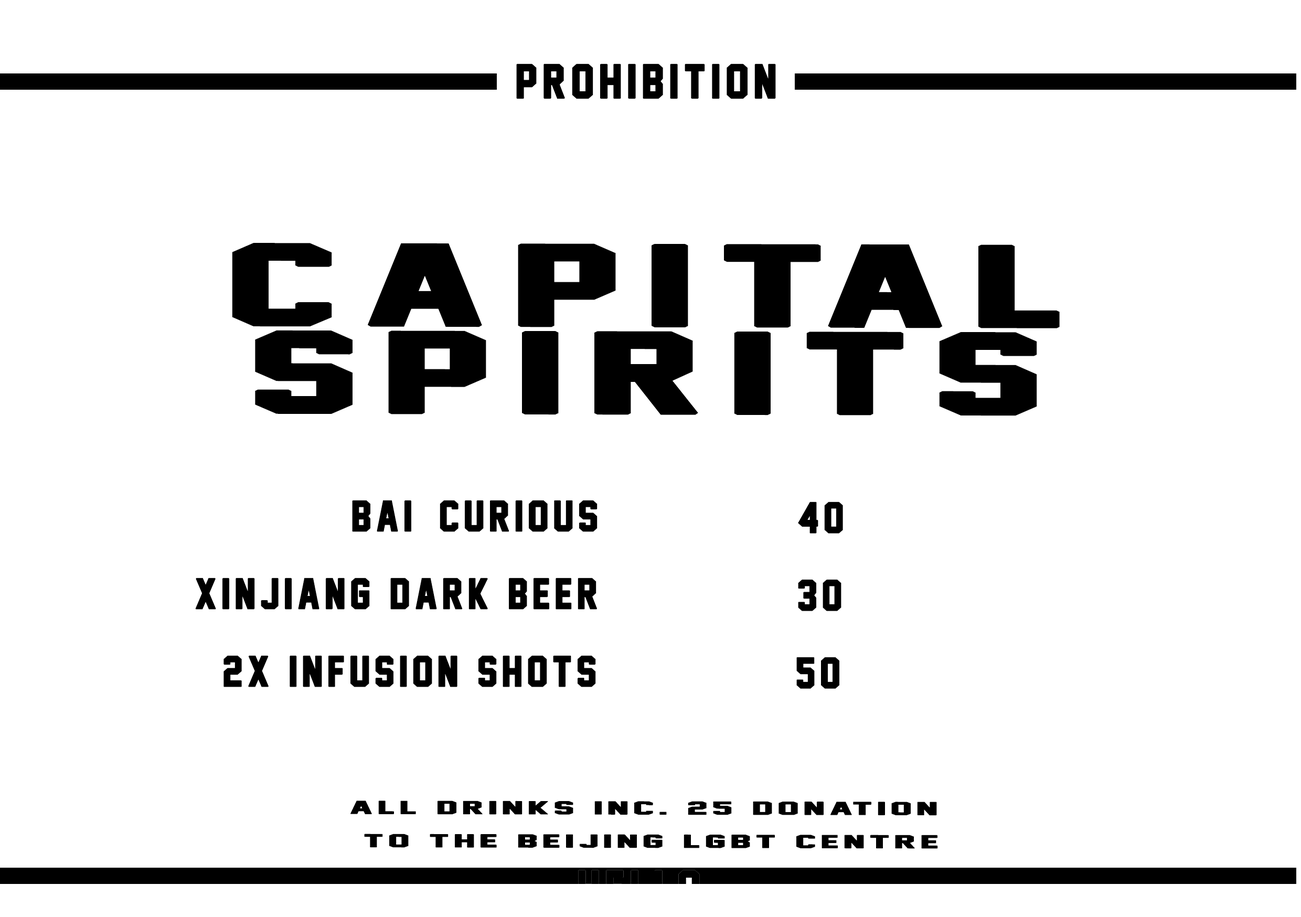
<style>
.page{position:relative;width:1301px;height:917px;background:#ffffff}
.page>*{position:absolute;margin:0}
.t1{font:43.7px "JerseyM54";letter-spacing:0.1em;color:#000000;font-weight:bold}
.t2{font:104.9px/87.4px "JerseyM54";letter-spacing:0.1em;color:#000000;font-weight:bold;scale:2.04 1}
.t3{font:39.3px "JerseyM54";letter-spacing:0.1em;color:#000000;font-weight:bold}
.t4{font:39.6px "JerseyM54";letter-spacing:0.1em;color:#000000;font-weight:bold}
.t5{font:16.8px/33.2px "JerseyM54";letter-spacing:0.1em;color:#000000;font-weight:bold;scale:2.4 1}
</style>
<div class="page">
<p class="t1" style="left:516px;top:63px;width:260px;height:36px">prohibition</p>
<p class="t2" style="left:232px;top:243px;width:827px;height:173px;text-align:center">capital<br>spirits</p>
<p class="t3" style="left:352px;top:500px;width:245px;height:32px">bai- curious</p>
<p class="t4" style="left:798px;top:501px;width:45px;height:32px">40</p>
<p class="t3" style="left:195px;top:577px;width:402px;height:32px">xinjiang dark beer</p>
<p class="t4" style="left:798px;top:579px;width:43px;height:32px">30</p>
<p class="t3" style="left:223px;top:655px;width:373px;height:32px">2x infusion shots</p>
<p class="t4" style="left:796px;top:657px;width:43px;height:32px">50</p>
<p class="t5" style="left:350px;top:800px;width:588px;height:49px;text-align:center">all drinks inc. 25 donation<br> to the beijing lgbt centre</p>
</div>
